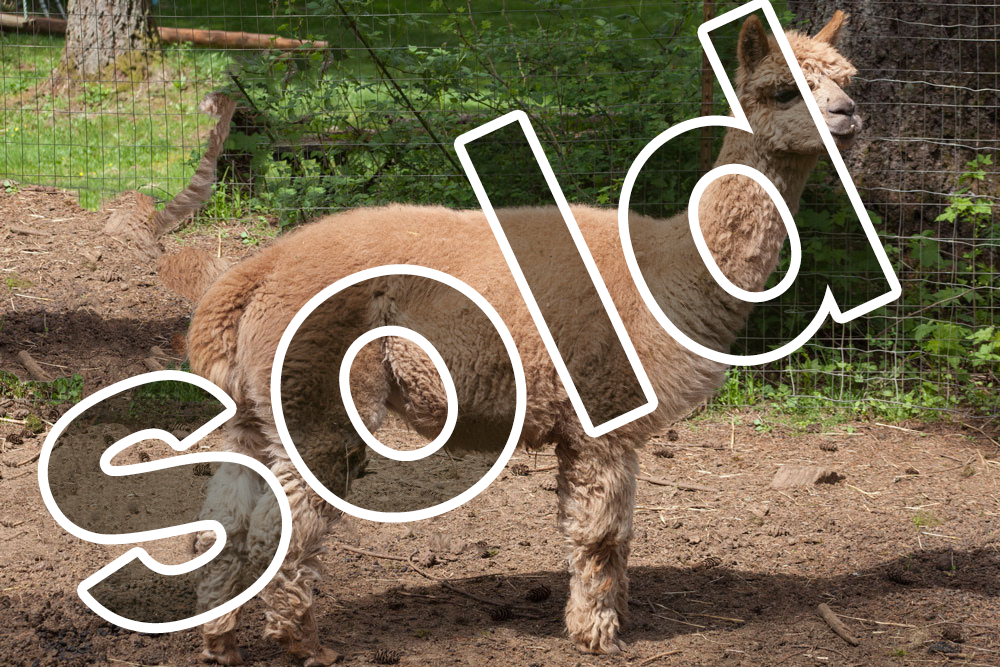
<style>
.page{position:relative;width:1000px;height:667px}
.page>*{position:absolute;margin:0}
.t1{font:435.1px "Arial-BoldMT"}
</style>
<div class="page">
<p class="t1" style="left:47px;top:7px;width:845px;height:617px;rotate:-25deg">sold</p>
</div>
